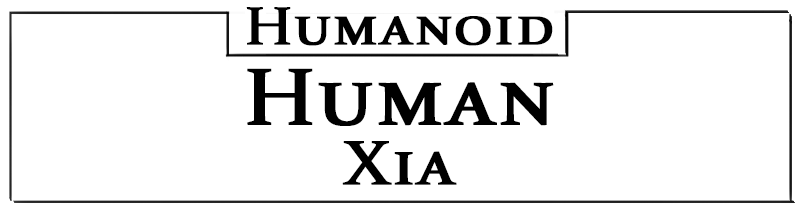
<style>
.page{position:relative;width:799px;height:207px;background:#ffffff}
.page>*{position:absolute;margin:0}
.t1{font:54px "Constantia";color:#000000;font-variant:small-caps;font-weight:bold;scale:1.11 1}
.t2{font:81px/80px "Constantia";color:#000000;font-variant:small-caps;font-weight:bold;scale:1.11 1}
.t3{font:63px/60px "Constantia";color:#000000;font-variant:small-caps;font-weight:bold;scale:1.11 1}
</style>
<div class="page">
<p class="t1" style="left:246px;top:7px;width:308px;height:178px;text-align:center">Humanoid<br><span class="t2">Human<br></span><span class="t3">Xia</span></p>
</div>
